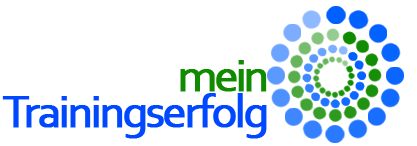
<style>
.page{position:relative;width:417px;height:146px;background:#ffffff}
.page>*{position:absolute;margin:0}
.t1{font:48px "Corbel";letter-spacing:-0.088em;color:#108b00;font-weight:bold}
.t2{font:48px "Corbel";letter-spacing:-0.075em;color:#0048ff;font-weight:bold}
</style>
<div class="page">
<p class="t1" style="left:180px;top:60px;width:87px;height:32px">mein</p>
<p class="t2" style="left:2px;top:93px;width:265px;height:46px">Trainingserfolg</p>
</div>
